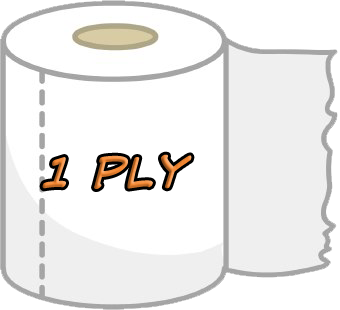
<style>
.page{position:relative;width:340px;height:310px;background:#ffffff}
.page>*{position:absolute;margin:0}
.t1{font:48px "WebLettererProBB-Italic"}
</style>
<div class="page">
<p class="t1" style="left:42px;top:154px;width:150px;height:35px">1 Ply</p>
</div>
